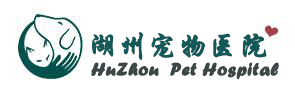
<style>
.page{position:relative;width:295px;height:91px;background:#ffffff}
.page>*{position:absolute;margin:0}
.t1{font:29.3px "STXingkai";color:#145857;font-weight:bold}
.t2{font:18.7px "ForteMT";color:#3c4646;font-weight:bold}
</style>
<div class="page">
<p class="t1" style="left:92px;top:32px;width:175px;height:29px">湖州宠物医院</p>
<p class="t2" style="left:91px;top:62px;width:188px;height:18px">HuZhou  Pet Hospital</p>
</div>
